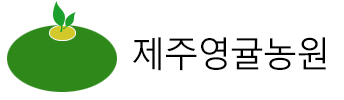
<style>
.page{position:relative;width:344px;height:100px;background:#ffffff}
.page>*{position:absolute;margin:0}
.t1{font:35px "MalgunGothic";letter-spacing:-0.06em;color:#000000}
</style>
<div class="page">
<p class="t1" style="left:133px;top:37px;width:193px;height:34px">제주영귤농원</p>
</div>
